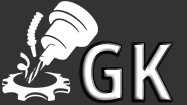
<style>
.page{position:relative;width:187px;height:105px;background:#333333}
.page>*{position:absolute;margin:0}
.t1{font:80.4px "NotoSans-CondensedBold"}
</style>
<div class="page">
<p class="t1" style="left:80px;top:42px;width:92px;height:60px">GK</p>
</div>
